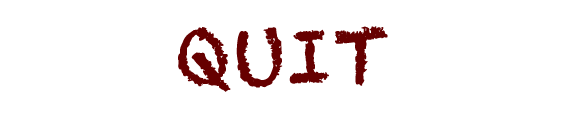
<style>
.page{position:relative;width:567px;height:113px;background:#ffffff}
.page>*{position:absolute;margin:0}
.t1{font:72px "Chalkduster";letter-spacing:0.005em;color:#660000;font-weight:bold}
</style>
<div class="page">
<p class="t1" style="left:178px;top:26px;width:210px;height:66px">QUIT</p>
</div>
